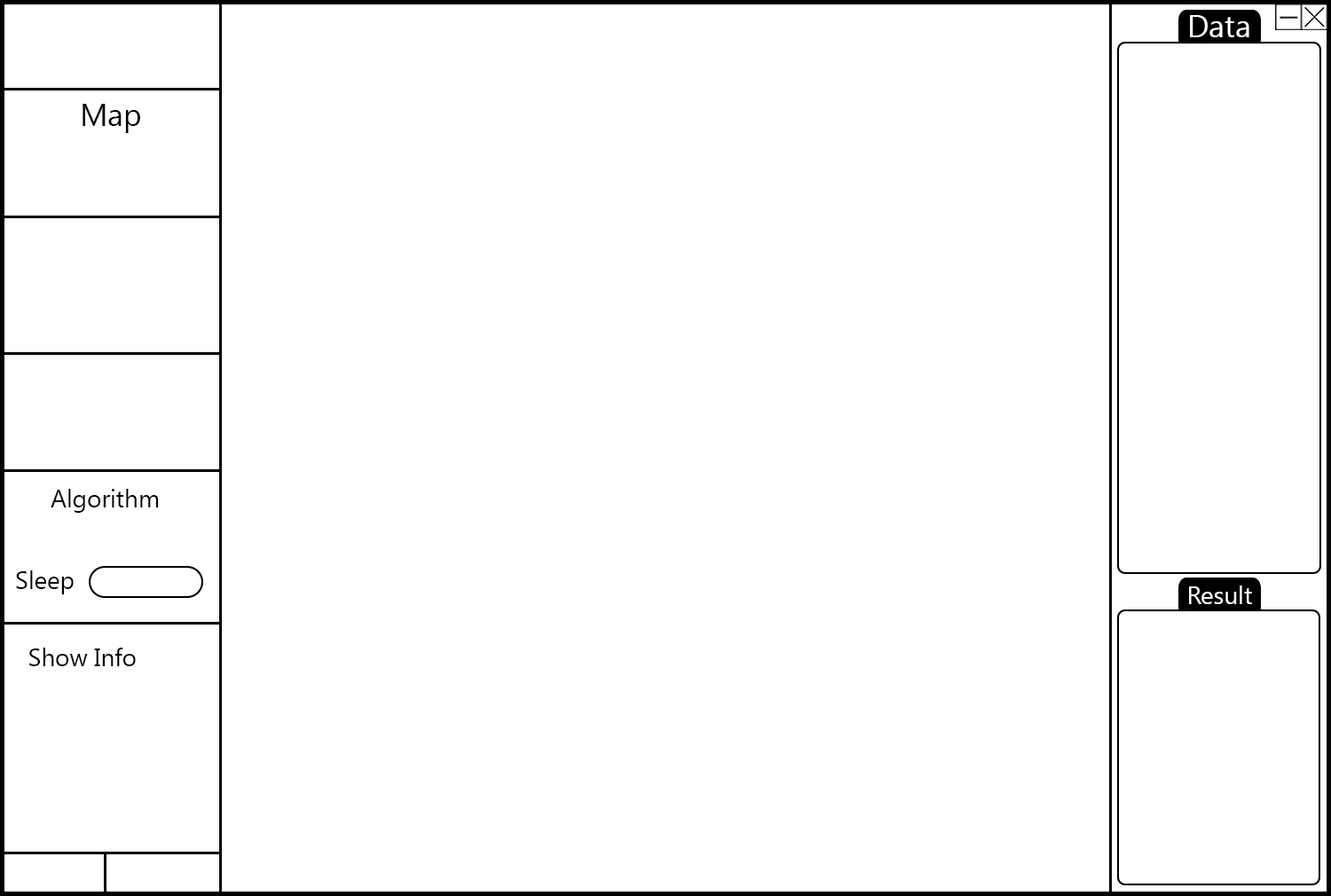
<style>
.page{position:relative;width:1331px;height:896px;background:#ffffff}
.page>*{position:absolute;margin:0}
.t1{font:30.8px "LaoUI";color:#ffffff}
.t2{font:30.8px "LaoUI";color:#000000}
.t3{font:24.6px "LaoUI";color:#000000}
.t4{font:24.6px "LaoUI";color:#ffffff}
</style>
<div class="page">
<p class="t1" style="left:1190px;top:15px;width:59px;height:22px">Data</p>
<p class="t2" style="left:83px;top:104px;width:57px;height:29px">Map</p>
<p class="t3" style="left:51px;top:489px;width:108px;height:24px">Algorithm</p>
<p class="t3" style="left:16px;top:570px;width:58px;height:24px">Sleep</p>
<p class="t4" style="left:1189px;top:586px;width:63px;height:18px">Result</p>
<p class="t3" style="left:29px;top:648px;width:107px;height:18px">Show Info</p>
</div>
